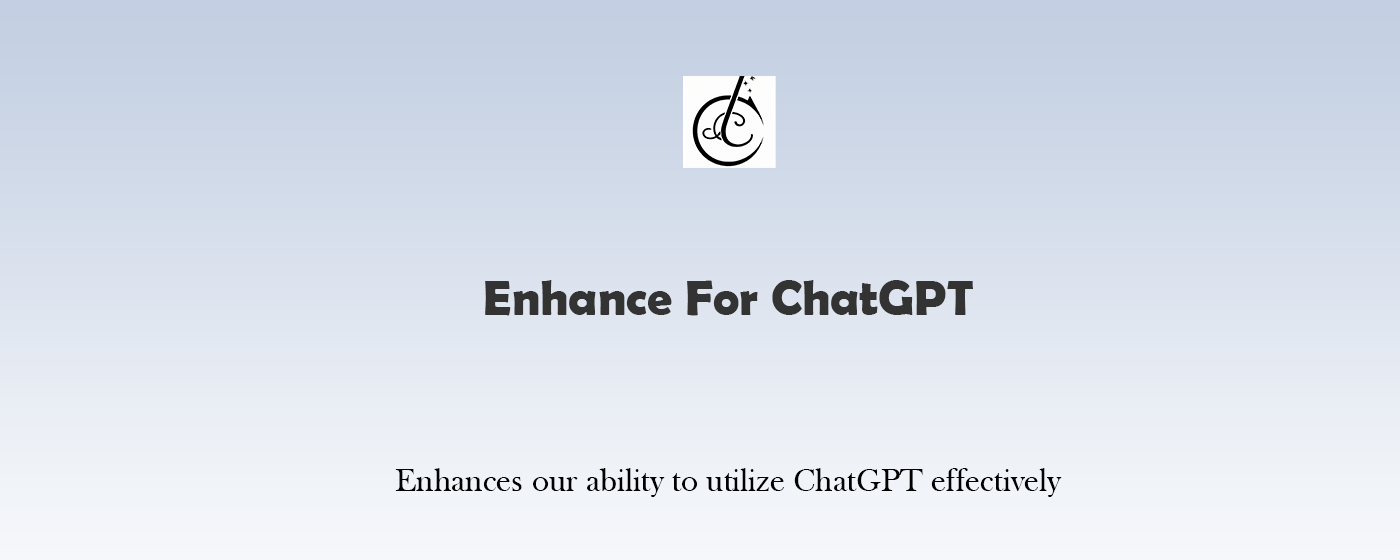
<style>
.page{position:relative;width:1400px;height:560px}
.page>*{position:absolute;margin:0}
.t1{font:50px "BerlinSansFBDemi-Bold";color:#333333}
.t2{font:33.3px "BaskOldFace";color:#000000}
</style>
<div class="page">
<p class="t1" style="left:485px;top:280px;width:488px;height:36px">Enhance For ChatGPT</p>
<p class="t2" style="left:395px;top:468px;width:667px;height:29px">Enhances our ability to utilize ChatGPT effectively</p>
</div>
